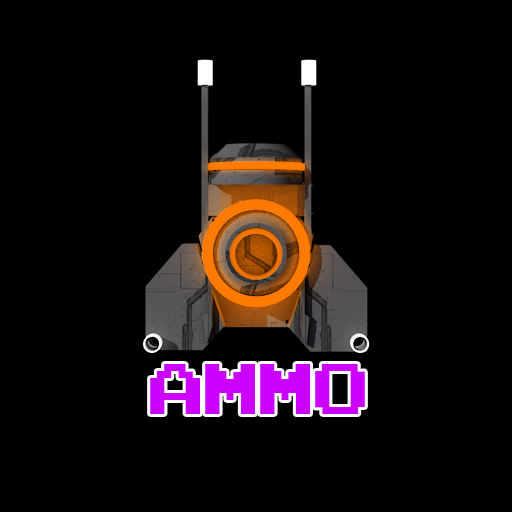
<style>
.page{position:relative;width:512px;height:512px;background:#000000}
.page>*{position:absolute;margin:0}
.t1{font:100px "ArcadeClassic";color:#cc00ff}
</style>
<div class="page">
<p class="t1" style="left:150px;top:364px;width:215px;height:50px">Ammo</p>
</div>
